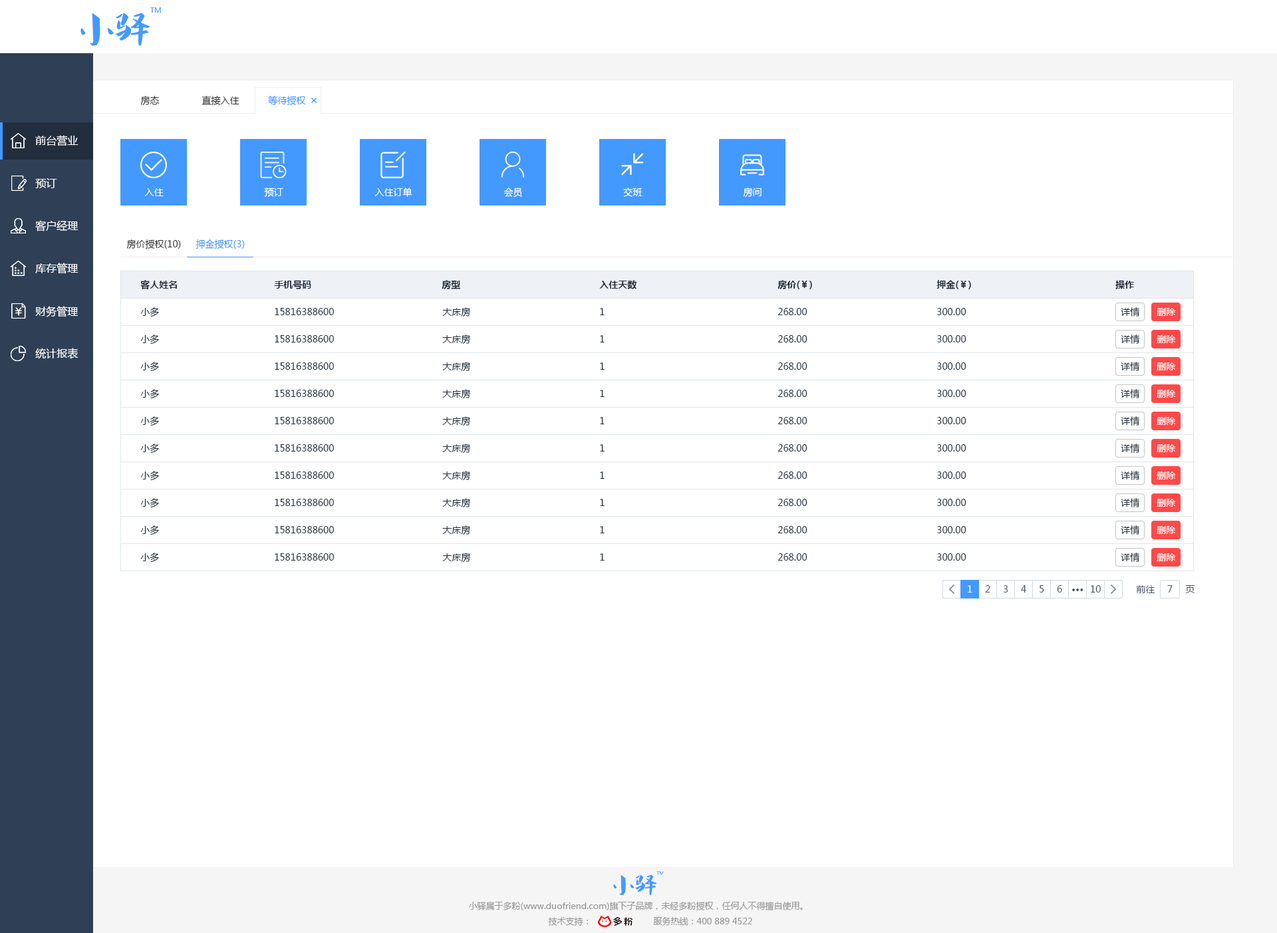
<style>
.page{position:relative;width:1277px;height:933px;background:#ffffff}
.page>*{position:absolute;margin:0}
.t1{font:9.3px "MicrosoftYaHei";color:#333333}
.t2{font:9.3px "MicrosoftYaHei";color:#4499ff}
.t3{font:10.6px "MicrosoftYaHei";color:#ffffff}
.t4{font:9.3px "MicrosoftYaHei";color:#ffffff}
.t5{font:9.3px "MicrosoftYaHei-Bold";color:#1f2d3d}
.t6{font:9.3px "MicrosoftYaHei";color:#1f2d3d}
.t7{font:9.3px "MicrosoftYaHei";color:#48576a}
.t8{font:9.3px "MicrosoftYaHei-Bold";color:#48576a}
.t9{font:8.6px "MicrosoftYaHei";color:#999999}
</style>
<div class="page">
<p class="t1" style="left:140px;top:96px;width:20px;height:9px">房态</p>
<p class="t1" style="left:202px;top:96px;width:38px;height:9px">直接入住</p>
<p class="t2" style="left:268px;top:96px;width:38px;height:10px">等待授权</p>
<p class="t3" style="left:35px;top:135px;width:44px;height:11px">前台营业</p>
<p class="t3" style="left:35px;top:178px;width:22px;height:10px">预订</p>
<p class="t4" style="left:144px;top:188px;width:20px;height:8px">入住</p>
<p class="t4" style="left:264px;top:188px;width:19px;height:9px">预订</p>
<p class="t4" style="left:375px;top:188px;width:38px;height:9px">入住订单</p>
<p class="t4" style="left:504px;top:188px;width:18px;height:10px">会员</p>
<p class="t4" style="left:623px;top:188px;width:20px;height:9px">交班</p>
<p class="t4" style="left:743px;top:188px;width:19px;height:9px">房间</p>
<p class="t3" style="left:35px;top:220px;width:44px;height:12px">客户经理</p>
<p class="t1" style="left:126px;top:240px;width:55px;height:9px">房价授权(10)</p>
<p class="t2" style="left:196px;top:240px;width:49px;height:9px">押金授权(3)</p>
<p class="t3" style="left:35px;top:263px;width:44px;height:11px">库存管理</p>
<p class="t5" style="left:140px;top:280px;width:37px;height:9px">客人姓名</p>
<p class="t5" style="left:274px;top:280px;width:37px;height:9px">手机号码</p>
<p class="t5" style="left:442px;top:280px;width:18px;height:9px">房型</p>
<p class="t5" style="left:599px;top:280px;width:38px;height:9px">入住天数</p>
<p class="t5" style="left:778px;top:280px;width:34px;height:9px">房价(￥)</p>
<p class="t5" style="left:937px;top:280px;width:34px;height:9px">押金(￥)</p>
<p class="t5" style="left:1116px;top:280px;width:18px;height:9px">操作</p>
<p class="t3" style="left:35px;top:306px;width:44px;height:11px">财务管理</p>
<p class="t6" style="left:140px;top:307px;width:19px;height:10px">小多</p>
<p class="t6" style="left:275px;top:308px;width:59px;height:7px">15816388600</p>
<p class="t6" style="left:442px;top:307px;width:29px;height:10px">大床房</p>
<p class="t6" style="left:600px;top:308px;width:5px;height:7px">1</p>
<p class="t6" style="left:778px;top:308px;width:30px;height:7px">268.00</p>
<p class="t6" style="left:937px;top:308px;width:30px;height:7px">300.00</p>
<p class="t6" style="left:1121px;top:307px;width:19px;height:10px">详情</p>
<p class="t4" style="left:1157px;top:308px;width:19px;height:8px">删除</p>
<p class="t6" style="left:140px;top:335px;width:19px;height:10px">小多</p>
<p class="t6" style="left:275px;top:335px;width:59px;height:8px">15816388600</p>
<p class="t6" style="left:442px;top:335px;width:29px;height:10px">大床房</p>
<p class="t6" style="left:600px;top:335px;width:5px;height:8px">1</p>
<p class="t6" style="left:778px;top:335px;width:30px;height:8px">268.00</p>
<p class="t6" style="left:937px;top:335px;width:30px;height:8px">300.00</p>
<p class="t6" style="left:1121px;top:335px;width:19px;height:9px">详情</p>
<p class="t4" style="left:1157px;top:335px;width:19px;height:8px">删除</p>
<p class="t3" style="left:35px;top:348px;width:44px;height:11px">统计报表</p>
<p class="t6" style="left:140px;top:362px;width:19px;height:10px">小多</p>
<p class="t6" style="left:275px;top:363px;width:59px;height:7px">15816388600</p>
<p class="t6" style="left:442px;top:362px;width:29px;height:10px">大床房</p>
<p class="t6" style="left:600px;top:363px;width:5px;height:7px">1</p>
<p class="t6" style="left:778px;top:363px;width:30px;height:7px">268.00</p>
<p class="t6" style="left:937px;top:363px;width:30px;height:7px">300.00</p>
<p class="t6" style="left:1121px;top:362px;width:19px;height:9px">详情</p>
<p class="t4" style="left:1157px;top:363px;width:19px;height:8px">删除</p>
<p class="t6" style="left:140px;top:389px;width:19px;height:10px">小多</p>
<p class="t6" style="left:275px;top:390px;width:59px;height:7px">15816388600</p>
<p class="t6" style="left:442px;top:389px;width:29px;height:10px">大床房</p>
<p class="t6" style="left:600px;top:390px;width:5px;height:7px">1</p>
<p class="t6" style="left:778px;top:390px;width:30px;height:7px">268.00</p>
<p class="t6" style="left:937px;top:390px;width:30px;height:7px">300.00</p>
<p class="t6" style="left:1121px;top:389px;width:19px;height:10px">详情</p>
<p class="t4" style="left:1157px;top:390px;width:19px;height:8px">删除</p>
<p class="t6" style="left:140px;top:416px;width:19px;height:10px">小多</p>
<p class="t6" style="left:275px;top:417px;width:59px;height:7px">15816388600</p>
<p class="t6" style="left:442px;top:416px;width:29px;height:10px">大床房</p>
<p class="t6" style="left:600px;top:417px;width:5px;height:7px">1</p>
<p class="t6" style="left:778px;top:417px;width:30px;height:7px">268.00</p>
<p class="t6" style="left:937px;top:417px;width:30px;height:7px">300.00</p>
<p class="t6" style="left:1121px;top:416px;width:19px;height:10px">详情</p>
<p class="t4" style="left:1157px;top:417px;width:19px;height:8px">删除</p>
<p class="t6" style="left:140px;top:444px;width:19px;height:10px">小多</p>
<p class="t6" style="left:275px;top:444px;width:59px;height:8px">15816388600</p>
<p class="t6" style="left:442px;top:444px;width:29px;height:10px">大床房</p>
<p class="t6" style="left:600px;top:444px;width:5px;height:8px">1</p>
<p class="t6" style="left:778px;top:444px;width:30px;height:8px">268.00</p>
<p class="t6" style="left:937px;top:444px;width:30px;height:8px">300.00</p>
<p class="t6" style="left:1121px;top:444px;width:19px;height:9px">详情</p>
<p class="t4" style="left:1157px;top:444px;width:19px;height:8px">删除</p>
<p class="t6" style="left:140px;top:471px;width:19px;height:10px">小多</p>
<p class="t6" style="left:275px;top:472px;width:59px;height:7px">15816388600</p>
<p class="t6" style="left:442px;top:471px;width:29px;height:10px">大床房</p>
<p class="t6" style="left:600px;top:472px;width:5px;height:7px">1</p>
<p class="t6" style="left:778px;top:472px;width:30px;height:7px">268.00</p>
<p class="t6" style="left:937px;top:472px;width:30px;height:7px">300.00</p>
<p class="t6" style="left:1121px;top:471px;width:19px;height:9px">详情</p>
<p class="t4" style="left:1157px;top:472px;width:19px;height:8px">删除</p>
<p class="t6" style="left:140px;top:498px;width:19px;height:10px">小多</p>
<p class="t6" style="left:275px;top:499px;width:59px;height:7px">15816388600</p>
<p class="t6" style="left:442px;top:498px;width:29px;height:10px">大床房</p>
<p class="t6" style="left:600px;top:499px;width:5px;height:7px">1</p>
<p class="t6" style="left:778px;top:499px;width:30px;height:7px">268.00</p>
<p class="t6" style="left:937px;top:499px;width:30px;height:7px">300.00</p>
<p class="t6" style="left:1121px;top:498px;width:19px;height:10px">详情</p>
<p class="t4" style="left:1157px;top:499px;width:19px;height:8px">删除</p>
<p class="t6" style="left:140px;top:526px;width:19px;height:10px">小多</p>
<p class="t6" style="left:275px;top:526px;width:59px;height:8px">15816388600</p>
<p class="t6" style="left:442px;top:526px;width:29px;height:10px">大床房</p>
<p class="t6" style="left:600px;top:526px;width:5px;height:8px">1</p>
<p class="t6" style="left:778px;top:526px;width:30px;height:8px">268.00</p>
<p class="t6" style="left:937px;top:526px;width:30px;height:8px">300.00</p>
<p class="t6" style="left:1121px;top:526px;width:19px;height:9px">详情</p>
<p class="t4" style="left:1157px;top:526px;width:19px;height:8px">删除</p>
<p class="t6" style="left:140px;top:553px;width:19px;height:10px">小多</p>
<p class="t6" style="left:275px;top:554px;width:59px;height:7px">15816388600</p>
<p class="t6" style="left:442px;top:553px;width:29px;height:10px">大床房</p>
<p class="t6" style="left:600px;top:554px;width:5px;height:7px">1</p>
<p class="t6" style="left:778px;top:554px;width:30px;height:7px">268.00</p>
<p class="t6" style="left:937px;top:554px;width:30px;height:7px">300.00</p>
<p class="t6" style="left:1121px;top:553px;width:19px;height:9px">详情</p>
<p class="t4" style="left:1157px;top:554px;width:19px;height:8px">删除</p>
<p class="t4" style="left:968px;top:585px;width:5px;height:8px">1</p>
<p class="t7" style="left:985px;top:585px;width:6px;height:8px">2</p>
<p class="t7" style="left:1003px;top:585px;width:6px;height:8px">3</p>
<p class="t7" style="left:1021px;top:585px;width:6px;height:8px">4</p>
<p class="t7" style="left:1040px;top:585px;width:5px;height:8px">5</p>
<p class="t7" style="left:1057px;top:585px;width:6px;height:8px">6</p>
<p class="t8" style="left:1073px;top:589px;width:11px;height:2px">···</p>
<p class="t7" style="left:1091px;top:585px;width:10px;height:8px">10</p>
<p class="t7" style="left:1136px;top:585px;width:20px;height:8px">前往</p>
<p class="t7" style="left:1168px;top:585px;width:5px;height:8px">7</p>
<p class="t7" style="left:1186px;top:585px;width:9px;height:8px">页</p>
<p class="t9" style="left:468px;top:902px;width:335px;height:9px">小驿属于多粉(www.duofriend.com)旗下子品牌，未经多粉授权，任何人不得擅自使用。</p>
<p class="t9" style="left:548px;top:917px;width:40px;height:9px">技术支持：</p>
<p class="t9" style="left:653px;top:917px;width:99px;height:9px">服务热线：400 889 4522</p>
</div>
